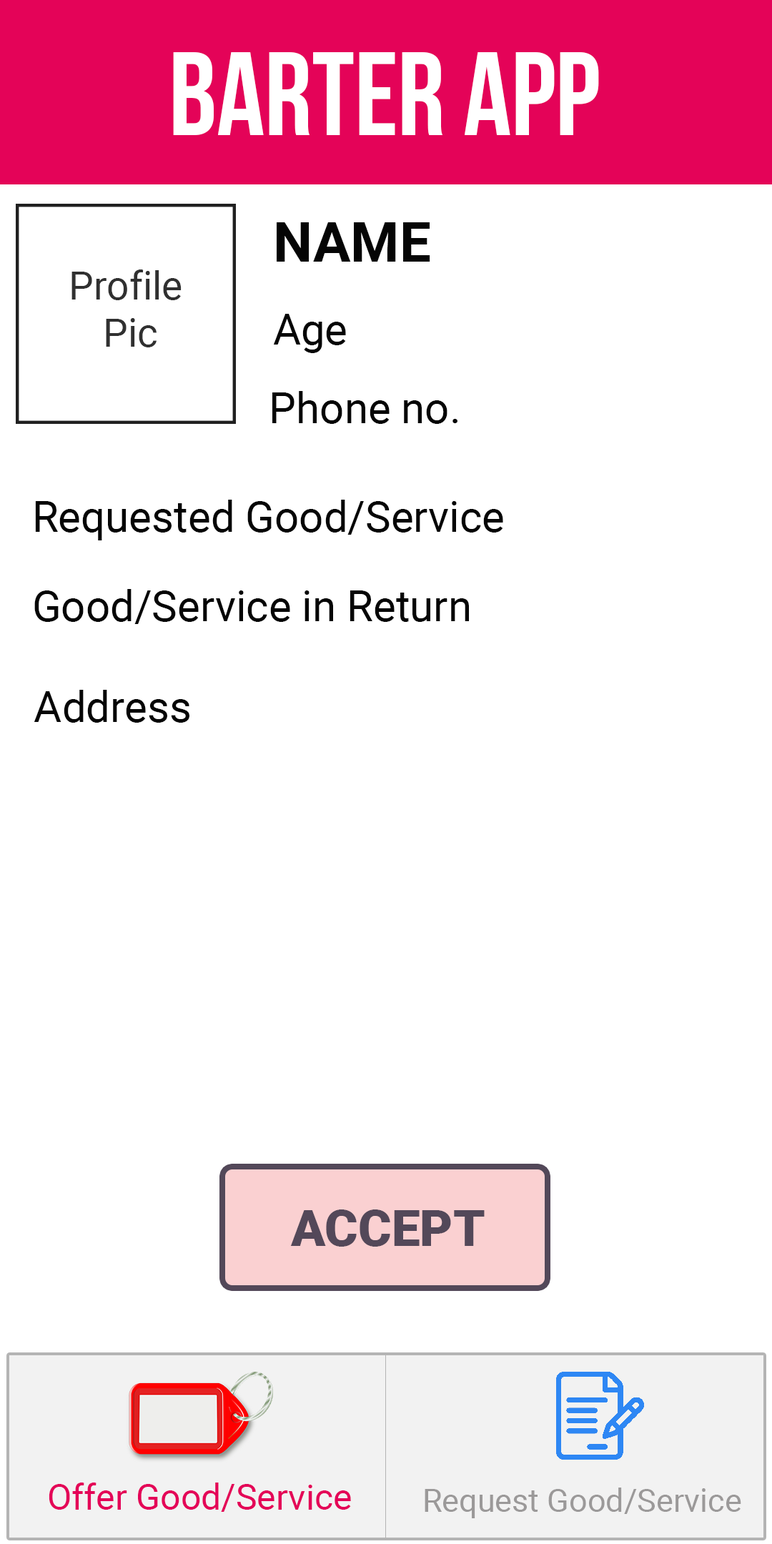
<style>
.page{position:relative;width:772px;height:1544px;background:#ffffff}
.page>*{position:absolute;margin:0}
.t1{font:118px "BebasNeue";color:#ffffff}
.t2{font:55.8px "Roboto-Bold";color:#050505}
.t3{font:39.3px "Roboto-Regular";color:#303030}
.t4{font:42.9px "Roboto-Regular";color:#050505}
.t5{font:50.8px "Roboto-Black";color:#534859}
.t6{font:35.7px "Roboto-Regular";color:#e40358}
.t7{font:32.2px "Roboto-Regular";color:#9b9999}
</style>
<div class="page">
<p class="t1" style="left:173px;top:52px;width:426px;height:83px">BArter App</p>
<p class="t2" style="left:277px;top:222px;width:153px;height:40px">NAME</p>
<p class="t3" style="left:71px;top:270px;width:111px;height:77px;text-align:center">Profile<br> Pic</p>
<p class="t4" style="left:273px;top:314px;width:73px;height:39px">Age</p>
<p class="t4" style="left:272px;top:391px;width:186px;height:33px">Phone no.</p>
<p class="t4" style="left:35px;top:500px;width:468px;height:41px">Requested Good/Service</p>
<p class="t4" style="left:34px;top:589px;width:435px;height:35px">Good/Service in Return</p>
<p class="t4" style="left:34px;top:690px;width:155px;height:33px">Address</p>
<p class="t5" style="left:290px;top:1210px;width:195px;height:37px">ACCEPT</p>
<p class="t6" style="left:49px;top:1483px;width:302px;height:29px">Offer Good/Service</p>
<p class="t7" style="left:425px;top:1488px;width:316px;height:31px">Request Good/Service</p>
</div>
